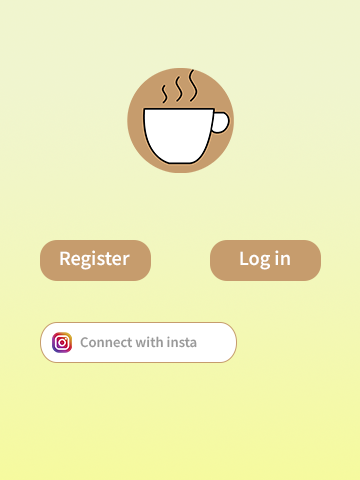
<style>
.page{position:relative;width:360px;height:480px}
.page>*{position:absolute;margin:0}
.t1{font:18px "NotoSansKR-SemiBold";color:#ffffff}
.t2{font:13px "NotoSansKR-SemiBold";color:#999999}
</style>
<div class="page">
<p class="t1" style="left:60px;top:250px;width:70px;height:20px">Register</p>
<p class="t1" style="left:240px;top:250px;width:50px;height:20px">Log in</p>
<p class="t2" style="left:80px;top:336px;width:117px;height:12px">Connect with insta</p>
</div>
